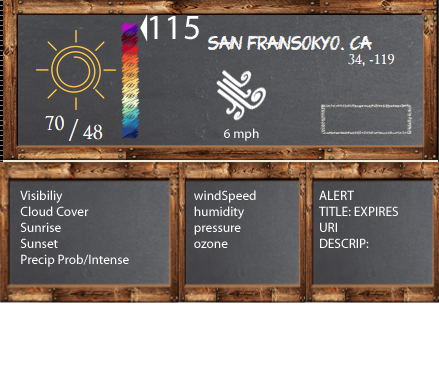
<style>
.page{position:relative;width:439px;height:384px;background:#ffffff}
.page>*{position:absolute;margin:0}
.t1{font:35.5px "MyriadPro-Regular";color:#ffffff}
.t2{font:13.3px "MyriadPro-Regular";color:#ffffff}
</style>
<div class="page">
<p class="t1" style="left:149px;top:16px;width:50px;height:24px">115</p>
<p class="t2" style="left:224px;top:128px;width:35px;height:13px">6 mph</p>
<p class="t2" style="left:20px;top:190px;width:109px;height:77px">Visibiliy<br>Cloud Cover<br>Sunrise<br>Sunset<br>Precip Prob/Intense</p>
<p class="t2" style="left:194px;top:190px;width:62px;height:58px">windSpeed<br>humidity<br>pressure<br>ozone</p>
<p class="t2" style="left:319px;top:190px;width:79px;height:58px">ALERT<br>TITLE: EXPIRES<br>URI<br>DESCRIP:</p>
</div>
